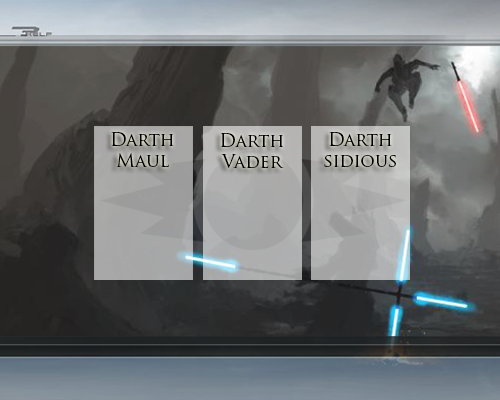
<style>
.page{position:relative;width:500px;height:400px}
.page>*{position:absolute;margin:0}
.t1{font:18px "TrajanPro-Regular";color:#000000}
.t2{font:17.9px "TrajanPro-Regular";color:#000000}
</style>
<div class="page">
<p class="t1" style="left:111px;top:132px;width:63px;height:35px;text-align:center">Darth <br>Maul</p>
<p class="t2" style="left:220px;top:133px;width:64px;height:36px;text-align:center">Darth<br>Vader</p>
<p class="t2" style="left:324px;top:132px;width:72px;height:36px;text-align:center">Darth<br>sidious</p>
</div>
